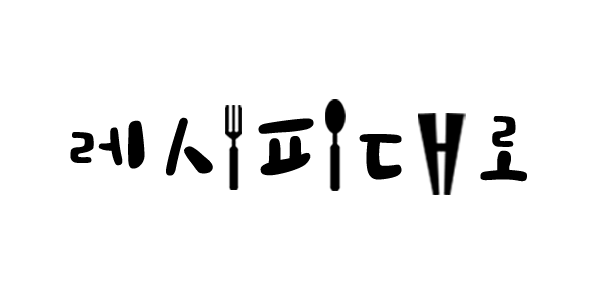
<style>
.page{position:relative;width:600px;height:300px;background:#ffffff}
.page>*{position:absolute;margin:0}
.t1{font:146px "TTSoopsokeseoR";color:#000000}
</style>
<div class="page">
<p class="t1" style="left:70px;top:101px;width:457px;height:116px">레시피대로</p>
</div>
